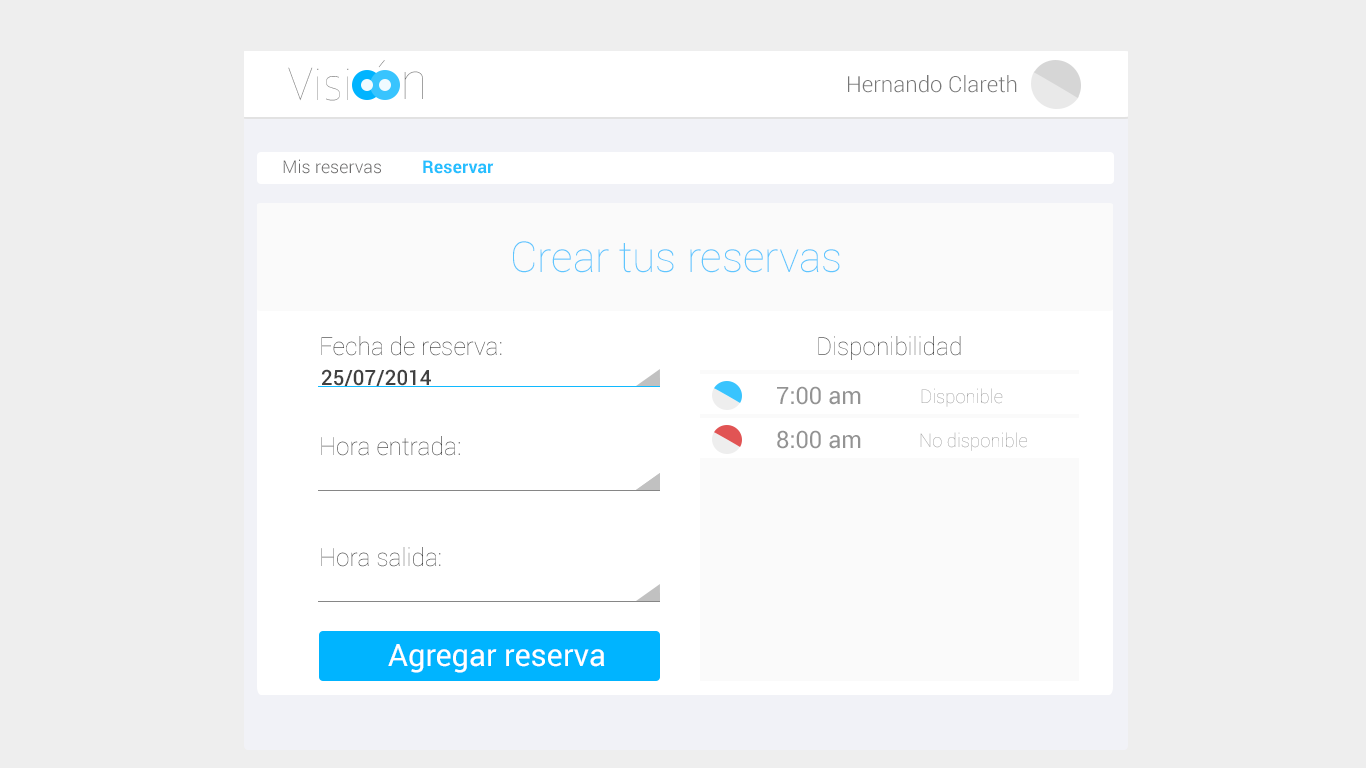
<style>
.page{position:relative;width:1366px;height:768px;background:#eeeeee}
.page>*{position:absolute;margin:0}
.t1{font:44.7px "GloberThinFree"}
.t2{font:44.7px "GloberThinFree";color:#777777}
.t3{font:51.2px "GloberThinFree";color:#777777}
.t4{font:22.2px "Roboto-Light";color:#777777}
.t5{font:17.8px "Roboto-Light";color:#6c6b6b}
.t6{font:17.8px "Roboto-Bold";color:#25bfff}
.t7{font:42.4px "Roboto-Thin";color:#5fc6fe}
.t8{font:24.9px "Roboto-Thin";color:#414141}
.t9{font:21.3px "Roboto-Medium";color:#414141;scale:0.97 1}
.t10{font:24px "Roboto-Regular";color:#939393}
.t11{font:18.6px "Roboto-Thin";color:#939393}
.t12{font:31.1px "Roboto-Regular";color:#ffffff}
</style>
<div class="page">
<p class="t1" style="left:378px;top:60px;width:7px;height:8px">´</p>
<p class="t2" style="left:288px;top:67px;width:61px;height:34px">Visi</p>
<p class="t3" style="left:404px;top:71px;width:19px;height:28px">n</p>
<p class="t4" style="left:848px;top:75px;width:169px;height:18px">Hernando Clareth</p>
<p class="t5" style="left:283px;top:159px;width:98px;height:15px">Mis reservas</p>
<p class="t6" style="left:423px;top:160px;width:71px;height:14px">Reservar</p>
<p class="t7" style="left:513px;top:241px;width:327px;height:32px">Crear tus reservas</p>
<p class="t8" style="left:321px;top:336px;width:181px;height:20px">Fecha de reserva:</p>
<p class="t8" style="left:818px;top:336px;width:143px;height:24px">Disponibilidad</p>
<p class="t9" style="left:321px;top:369px;width:110px;height:18px">25/07/2014</p>
<p class="t10" style="left:777px;top:386px;width:84px;height:19px">7:00 am</p>
<p class="t11" style="left:921px;top:388px;width:82px;height:19px">Disponible</p>
<p class="t8" style="left:321px;top:436px;width:139px;height:20px">Hora entrada:</p>
<p class="t10" style="left:777px;top:430px;width:84px;height:19px">8:00 am</p>
<p class="t11" style="left:920px;top:432px;width:107px;height:19px">No disponible</p>
<p class="t8" style="left:321px;top:547px;width:120px;height:20px">Hora salida:</p>
<p class="t12" style="left:388px;top:644px;width:217px;height:29px">Agregar reserva</p>
</div>
